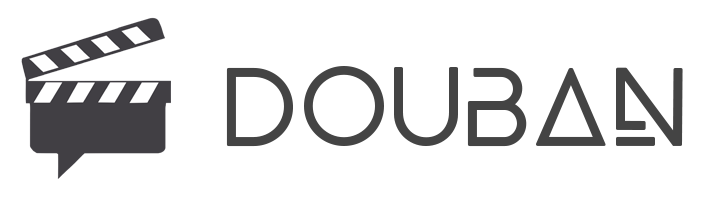
<style>
.page{position:relative;width:709px;height:200px;background:#ffffff}
.page>*{position:absolute;margin:0}
.t1{font:108.5px "BEYNO";color:#444444}
</style>
<div class="page">
<p class="t1" style="left:226px;top:66px;width:457px;height:81px">Douban</p>
</div>
